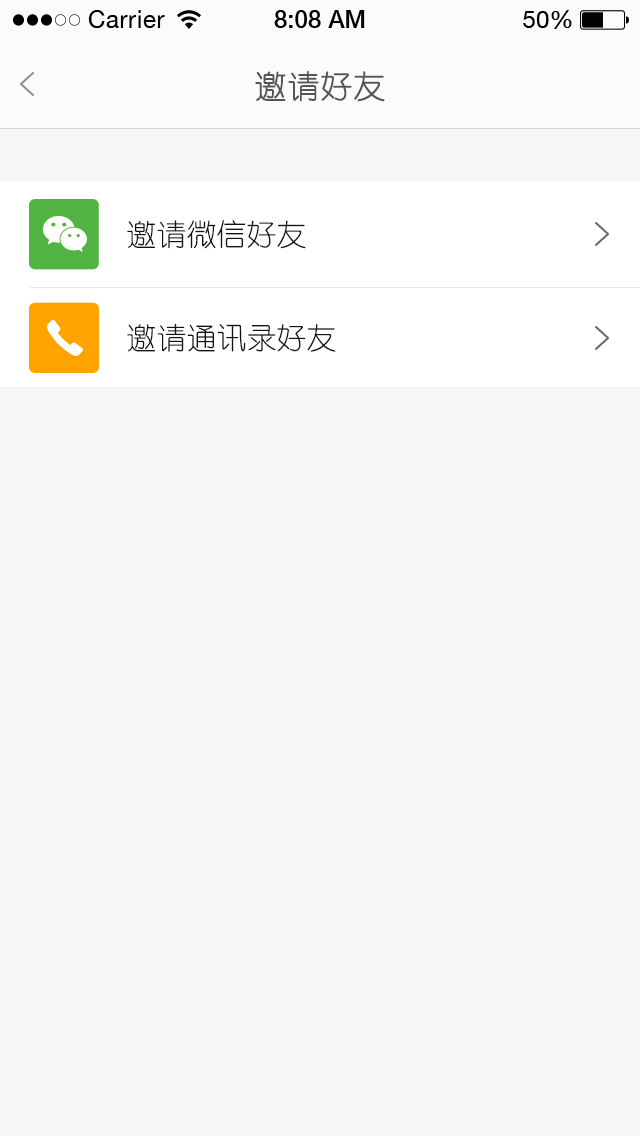
<style>
.page{position:relative;width:640px;height:1136px;background:#f5f6f7}
.page>*{position:absolute;margin:0}
.t1{font:32px "YouYuan";color:#555555;text-transform:uppercase;font-weight:bold}
.t2{font:30px "YouYuan";color:#121414}
</style>
<div class="page">
<p class="t1" style="left:255px;top:71px;width:130px;height:31px">邀请好友</p>
<p class="t2" style="left:127px;top:220px;width:179px;height:29px">邀请微信好友</p>
<p class="t2" style="left:127px;top:323px;width:209px;height:29px">邀请通讯录好友</p>
</div>
